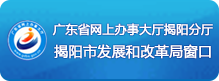
<style>
.page{position:relative;width:219px;height:81px}
.page>*{position:absolute;margin:0}
.t1{font:12px "MicrosoftYaHei";color:#ffffff;font-weight:bold}
.t2{font:14px "MicrosoftYaHei";color:#ffffff;font-weight:bold}
</style>
<div class="page">
<p class="t1" style="left:52px;top:23px;width:161px;height:36px;text-align:center">广东省网上办事大厅揭阳分厅<br><span class="t2">揭阳市发展和改革局窗口</span></p>
</div>
